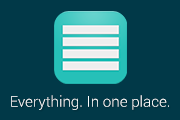
<style>
.page{position:relative;width:180px;height:120px;background:#013948}
.page>*{position:absolute;margin:0}
.t1{font:15px "Roboto-Light";color:#ffffff}
</style>
<div class="page">
<p class="t1" style="left:11px;top:95px;width:158px;height:15px">Everything. In one place.</p>
</div>
